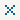
<style>
.page{position:relative;width:20px;height:20px;background:#f7f5f1}
.page>*{position:absolute;margin:0}
.t1{font:17px "Silkscreen";color:#0b6588}
</style>
<div class="page">
<p class="t1" style="left:5px;top:5px;width:10px;height:10px">X</p>
</div>
